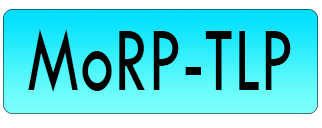
<style>
.page{position:relative;width:322px;height:128px}
.page>*{position:absolute;margin:0}
.t1{font:95px "TwCenMT-Regular";color:#000000;scale:0.72 1}
</style>
<div class="page">
<p class="t1" style="left:28px;top:29px;width:263px;height:63px">MoRP-TLP</p>
</div>
